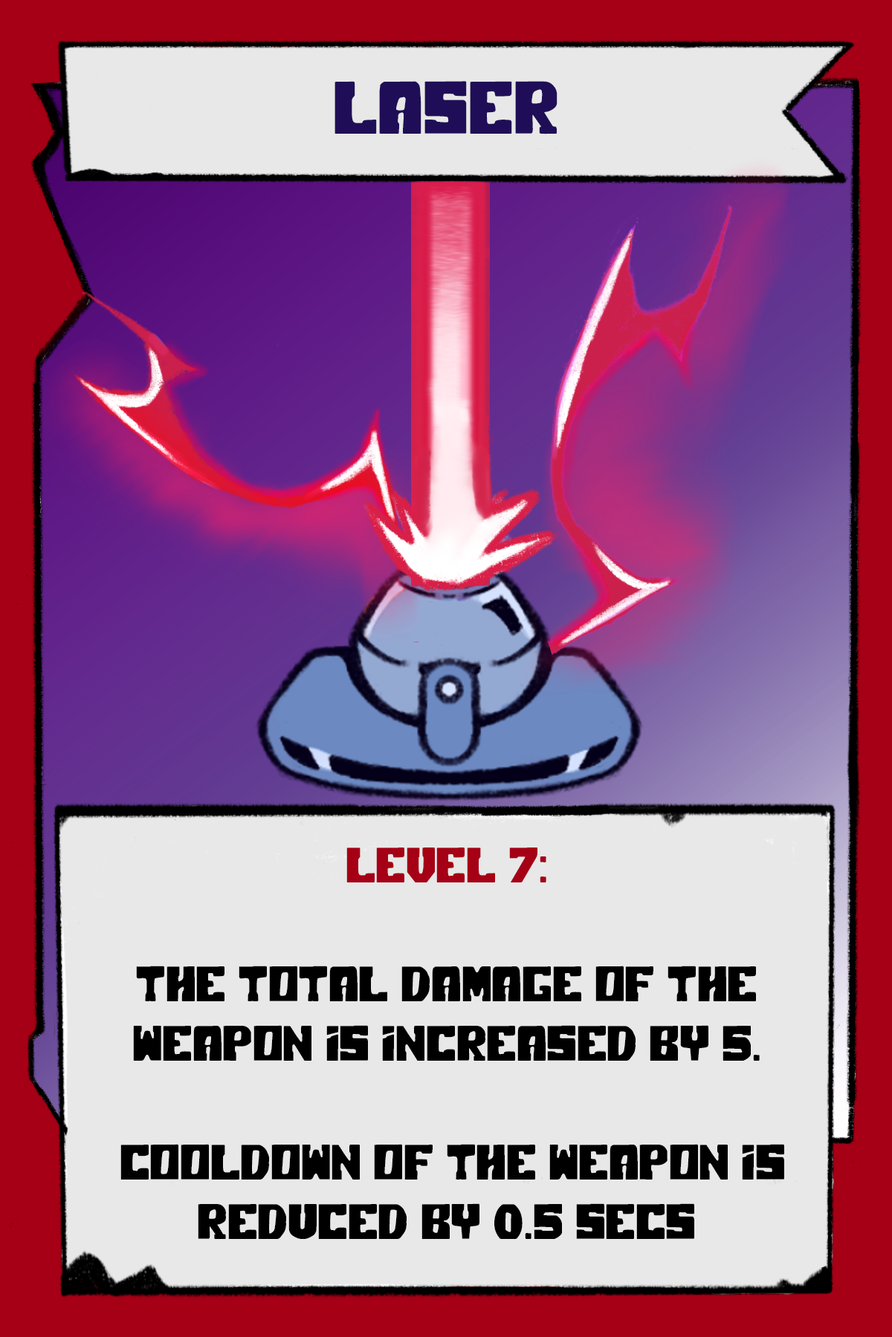
<style>
.page{position:relative;width:892px;height:1337px;background:#e8e8e8}
.page>*{position:absolute;margin:0}
.t1{font:74.3px "PolarPress";color:#1f0e57}
.t2{font:49.5px "PolarPress";color:#000000}
.t3{font:49.5px "PolarPress";color:#a50015}
</style>
<div class="page">
<p class="t1" style="left:334px;top:81px;width:223px;height:53px">LASER</p>
<p class="t2" style="left:120px;top:848px;width:664px;height:391px;text-align:center"><span class="t3">LEVEL 7:<br><br></span>The total damage of the weapon is increased by 5.<br><br> cooldown of the weapon is reduced by 0.5 secs</p>
</div>
